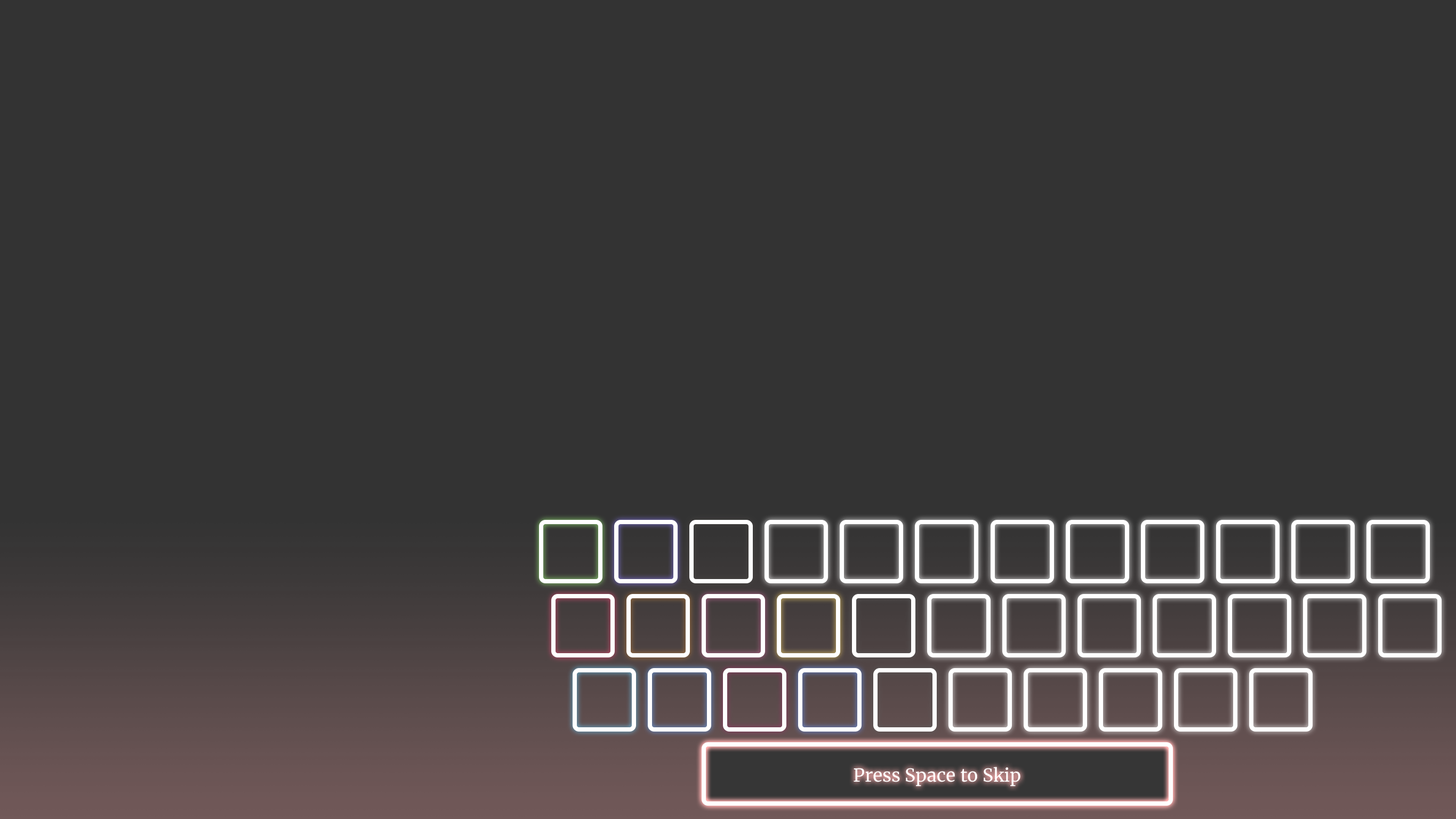
<style>
.page{position:relative;width:1456px;height:819px;background:#333333}
.page>*{position:absolute;margin:0}
.t1{font:17.9px "Merriweather-Regular";color:#ffffff}
</style>
<div class="page">
<p class="t1" style="left:854px;top:767px;width:166px;height:19px">Press Space to Skip</p>
</div>
